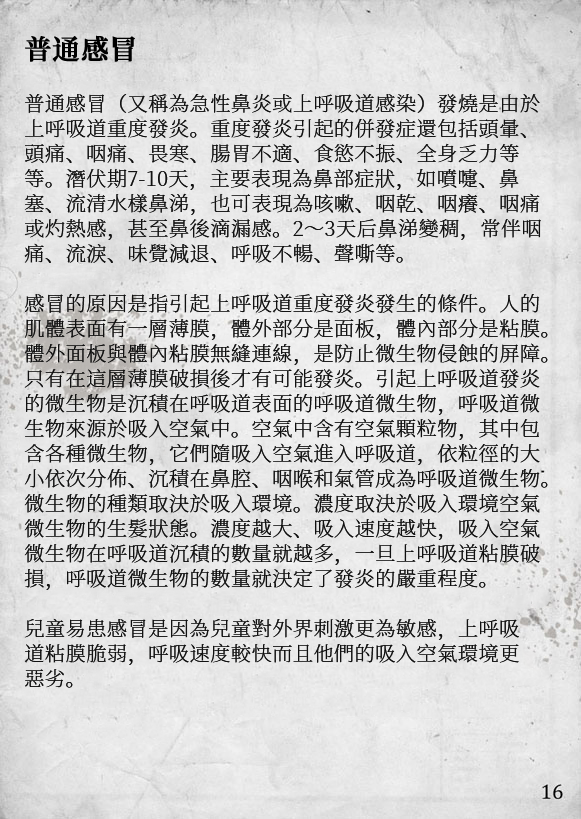
<style>
.page{position:relative;width:581px;height:819px}
.page>*{position:absolute;margin:0}
.t1{font:20.2px/25px "SourceHanSerifCN-ExtraLight";letter-spacing:0.02em;color:#111111}
.t2{font:27.2px/29px "SourceHanSerifCN-SemiBold";letter-spacing:0.02em;color:#000000;font-weight:bold}
</style>
<div class="page">
<p class="t1" style="left:24px;top:35px;width:524px;height:653px"><span class="t2">普通感冒<br><br></span>普通感冒（又稱為急性鼻炎或上呼吸道感染）發燒是由於<br>上呼吸道重度發炎。重度發炎引起的併發症還包括頭暈、<br>頭痛、咽痛、畏寒、腸胃不適、食慾不振、全身乏力等<br>等。潛伏期7-10天，主要表現為鼻部症狀，如噴嚏、鼻<br>塞、流清水樣鼻涕，也可表現為咳嗽、咽乾、咽癢、咽痛<br>或灼熱感，甚至鼻後滴漏感。2～3天后鼻涕變稠，常伴咽<br>痛、流淚、味覺減退、呼吸不暢、聲嘶等。<br><br>感冒的原因是指引起上呼吸道重度發炎發生的條件。人的<br>肌體表面有一層薄膜，體外部分是面板，體內部分是粘膜。<br>體外面板與體內粘膜無縫連線，是防止微生物侵蝕的屏障。<br>只有在這層薄膜破損後才有可能發炎。引起上呼吸道發炎<br>的微生物是沉積在呼吸道表面的呼吸道微生物，呼吸道微<br>生物來源於吸入空氣中。空氣中含有空氣顆粒物，其中包<br>含各種微生物，它們隨吸入空氣進入呼吸道，依粒徑的大<br>小依次分佈、沉積在鼻腔、咽喉和氣管成為呼吸道微生物。<br>微生物的種類取決於吸入環境。濃度取決於吸入環境空氣<br>微生物的生髮狀態。濃度越大、吸入速度越快，吸入空氣<br>微生物在呼吸道沉積的數量就越多，一旦上呼吸道粘膜破<br>損，呼吸道微生物的數量就決定了發炎的嚴重程度。<br><br>兒童易患感冒是因為兒童對外界刺激更為敏感，上呼吸<br>道粘膜脆弱，呼吸速度較快而且他們的吸入空氣環境更<br>惡劣。</p>
</div>
